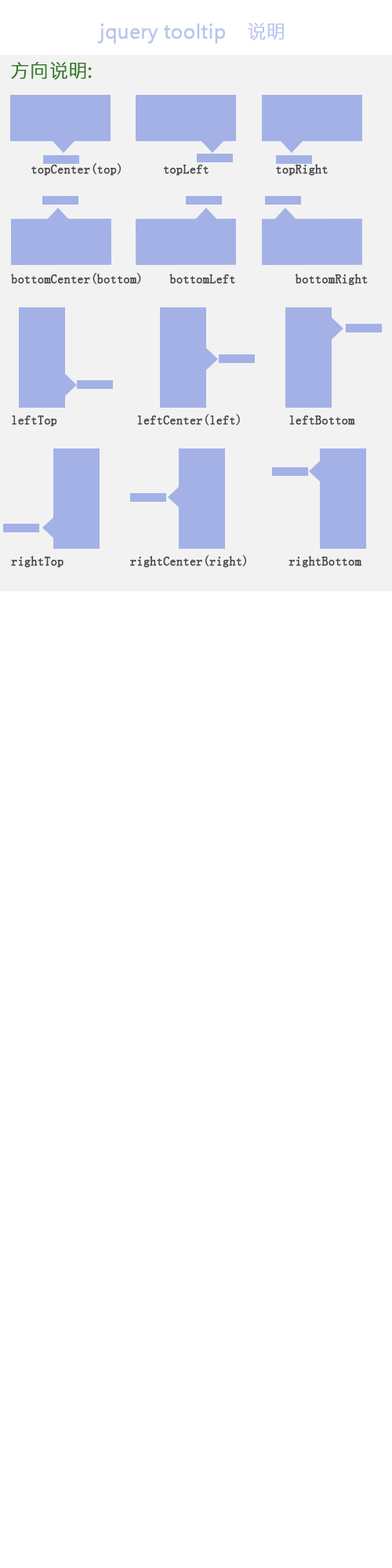
<style>
.page{position:relative;width:392px;height:1568px;background:#ffffff}
.page>*{position:absolute;margin:0}
.t1{font:18.8px "MicrosoftJhengHeiRegular";color:#bac5eb;font-weight:bold}
.t2{font:18.8px "MicrosoftJhengHeiRegular";color:#2e7a1f;font-weight:bold}
.t3{font:12.5px/15.7px "SimSun";color:#444444;font-weight:bold}
</style>
<div class="page">
<p class="t1" style="left:97px;top:23px;width:187px;height:21px">jquery tooltip    说明</p>
<p class="t2" style="left:11px;top:62px;width:81px;height:18px">方向说明:</p>
<p class="t3" style="left:11px;top:163px;width:357px;height:405px">topCenter(top)      topLeft          topRight<br><br><br><br><br><br><br>bottomCenter(bottom)    bottomLeft         bottomRight<br><br><br><br><br><br><br><br><br>leftTop            leftCenter(left)       leftBottom<br><br><br><br><br><br><br><br><br>rightTop          rightCenter(right)      rightBottom</p>
</div>
